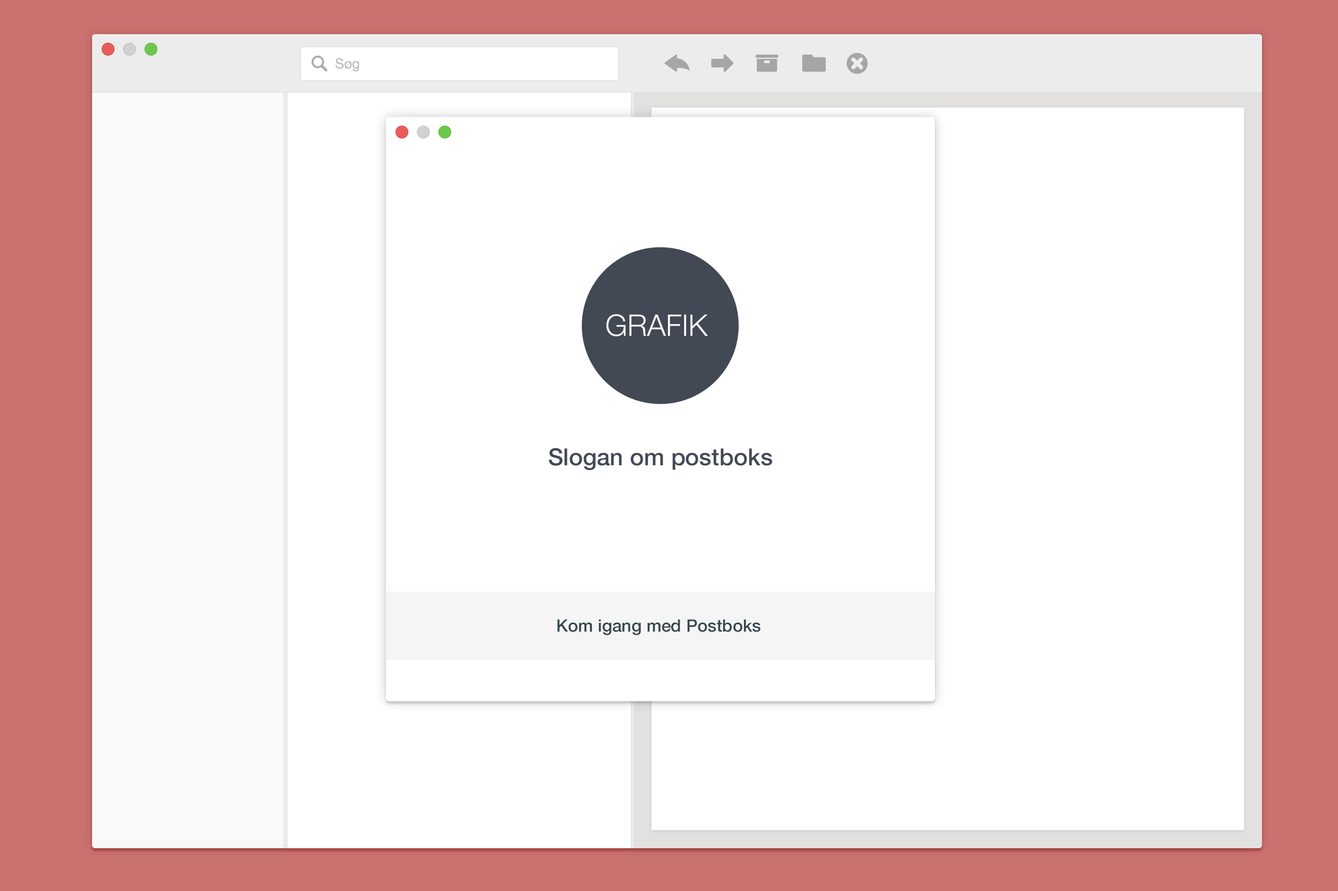
<style>
.page{position:relative;width:1338px;height:891px;background:#ffffff}
.page>*{position:absolute;margin:0}
.t1{font:29.8px "HelveticaNeue-Light";color:#f9f9f9}
.t2{font:23.5px "HelveticaNeue-Medium";color:#424854}
.t3{font:17.1px "HelveticaNeue-Medium";color:#424854}
</style>
<div class="page">
<p class="t1" style="left:606px;top:314px;width:102px;height:23px">GRAFIK</p>
<p class="t2" style="left:548px;top:448px;width:224px;height:22px">Slogan om postboks</p>
<p class="t3" style="left:557px;top:620px;width:203px;height:16px">Kom igang med Postboks</p>
</div>
